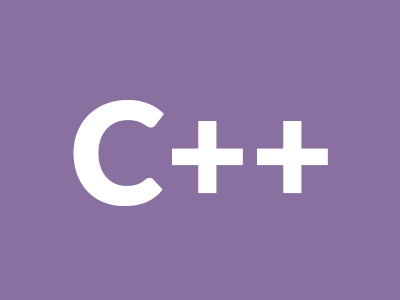
<style>
.page{position:relative;width:400px;height:300px;background:#8970a1}
.page>*{position:absolute;margin:0}
.t1{font:142.8px "Lato-Black";letter-spacing:0.01em;color:#ffffff}
</style>
<div class="page">
<p class="t1" style="left:73px;top:100px;width:255px;height:106px">C++</p>
</div>
